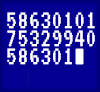
<style>
.page{position:relative;width:100px;height:92px;background:#030092}
.page>*{position:absolute;margin:0}
.t1{font:27px/18px "VT323-Regular";letter-spacing:0.005em;color:#ffffff}
</style>
<div class="page">
<p class="t1" style="left:7px;top:12px;width:88px;height:53px">58630101<br>75329940<br>586301</p>
</div>
